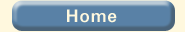
<style>
.page{position:relative;width:185px;height:32px;background:#5981a6}
.page>*{position:absolute;margin:0}
.t1{font:18px "Univers-Bold";letter-spacing:0.05em;color:#fff8de}
</style>
<div class="page">
<p class="t1" style="left:67px;top:9px;width:50px;height:14px">Home</p>
</div>
